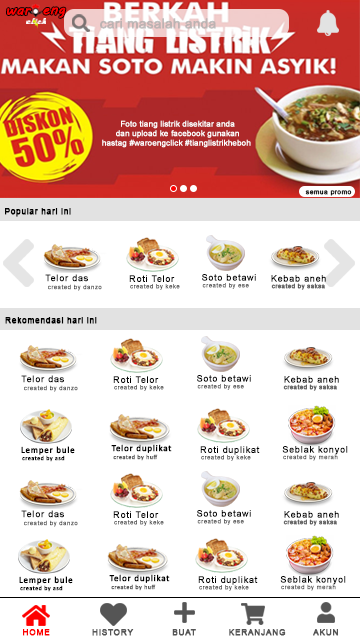
<style>
.page{position:relative;width:360px;height:640px;background:#ffffff}
.page>*{position:absolute;margin:0}
.t1{font:14.4px "MVBoli";color:#fe0000;font-weight:bold}
.t2{font:10.6px "HarlowSolid";color:#ffffff;font-weight:bold}
.t3{font:13.5px "ArialMT";color:#aaaaaa;font-weight:bold}
.t4{font:7.9px "ArialMT";color:#ffffff;font-weight:bold}
.t5{font:6.5px "ArialMT";letter-spacing:0.06em;color:#000000;font-weight:bold}
.t6{font:8.3px "ArialMT";letter-spacing:0.06em;color:#000000;font-weight:bold}
.t7{font:9px "ArialMT";letter-spacing:0.06em;color:#000000;font-weight:bold}
.t8{font:6px "ArialMT";letter-spacing:0.06em;color:#555555;font-weight:bold}
.t9{font:9px "Calibri";letter-spacing:0.06em;color:#000000;font-weight:bold}
.t10{font:6px "Calibri";letter-spacing:0.06em;color:#000000;font-weight:bold}
.t11{font:6px "Calibri";letter-spacing:0.06em;color:#555555;font-weight:bold}
.t12{font:8.3px "ArialMT";letter-spacing:0.06em;color:#fe0000;font-weight:bold}
.t13{font:8.3px "ArialMT";letter-spacing:0.06em;color:#555555;font-weight:bold}
</style>
<div class="page">
<p class="t1" style="left:7px;top:8px;width:25px;height:7px">war</p>
<p class="t1" style="left:43px;top:7px;width:23px;height:11px">eng</p>
<p class="t2" style="left:26px;top:18px;width:20px;height:6px">click</p>
<p class="t3" style="left:100px;top:18px;width:116px;height:11px;opacity:0.76">cari masalah anda</p>
<p class="t4" style="left:102px;top:120px;width:149px;height:28px;text-align:center">Foto tiang listrik disekitar anda<br>dan upload ke facebook gunakan<br>hastag #waroengclick #tianglistrikheboh</p>
<p class="t5" style="left:305px;top:190px;width:47px;height:6px">semua promo</p>
<p class="t6" style="left:5px;top:208px;width:66px;height:9px">Popular hari ini</p>
<p class="t7" style="left:45px;top:274px;width:43px;height:8px">Telor das</p>
<p class="t7" style="left:129px;top:275px;width:46px;height:7px">Roti Telor</p>
<p class="t7" style="left:202px;top:274px;width:54px;height:7px">Soto betawi</p>
<p class="t7" style="left:271px;top:275px;width:55px;height:7px">Kebab aneh</p>
<p class="t8" style="left:48px;top:284px;width:54px;height:7px">created by danzo</p>
<p class="t8" style="left:130px;top:284px;width:50px;height:6px">created by keke</p>
<p class="t8" style="left:202px;top:283px;width:47px;height:6px">created by ese</p>
<p class="t8" style="left:271px;top:283px;width:54px;height:7px">created by saksa</p>
<p class="t6" style="left:5px;top:317px;width:92px;height:7px">Rekomendasi hari ini</p>
<p class="t7" style="left:21px;top:375px;width:43px;height:8px">Telor das</p>
<p class="t7" style="left:113px;top:376px;width:46px;height:7px">Roti Telor</p>
<p class="t7" style="left:197px;top:375px;width:54px;height:7px">Soto betawi</p>
<p class="t7" style="left:284px;top:376px;width:55px;height:7px">Kebab aneh</p>
<p class="t8" style="left:24px;top:385px;width:54px;height:7px">created by danzo</p>
<p class="t8" style="left:114px;top:385px;width:50px;height:6px">created by keke</p>
<p class="t8" style="left:197px;top:384px;width:47px;height:6px">created by ese</p>
<p class="t8" style="left:283px;top:384px;width:54px;height:7px">created by saksa</p>
<p class="t9" style="left:21px;top:446px;width:54px;height:9px">Lemper bule</p>
<p class="t9" style="left:111px;top:444px;width:61px;height:9px">Telor duplikat</p>
<p class="t7" style="left:200px;top:446px;width:60px;height:9px">Roti duplikat</p>
<p class="t7" style="left:282px;top:446px;width:66px;height:9px">Seblak konyol</p>
<p class="t10" style="left:22px;top:455px;width:43px;height:7px">created by asd</p>
<p class="t11" style="left:113px;top:454px;width:45px;height:7px">created by huff</p>
<p class="t8" style="left:201px;top:455px;width:50px;height:6px">created by keke</p>
<p class="t8" style="left:283px;top:454px;width:55px;height:7px">created by merah</p>
<p class="t7" style="left:21px;top:510px;width:43px;height:8px">Telor das</p>
<p class="t7" style="left:197px;top:510px;width:54px;height:7px">Soto betawi</p>
<p class="t8" style="left:24px;top:520px;width:54px;height:7px">created by danzo</p>
<p class="t7" style="left:113px;top:511px;width:46px;height:7px">Roti Telor</p>
<p class="t8" style="left:114px;top:520px;width:50px;height:6px">created by keke</p>
<p class="t8" style="left:197px;top:519px;width:47px;height:6px">created by ese</p>
<p class="t8" style="left:283px;top:519px;width:54px;height:7px">created by saksa</p>
<p class="t7" style="left:284px;top:511px;width:55px;height:7px">Kebab aneh</p>
<p class="t9" style="left:19px;top:576px;width:54px;height:9px">Lemper bule</p>
<p class="t9" style="left:109px;top:574px;width:61px;height:9px">Telor duplikat</p>
<p class="t7" style="left:198px;top:576px;width:60px;height:9px">Roti duplikat</p>
<p class="t7" style="left:280px;top:576px;width:66px;height:9px">Seblak konyol</p>
<p class="t10" style="left:20px;top:585px;width:43px;height:7px">created by asd</p>
<p class="t11" style="left:111px;top:584px;width:45px;height:7px">created by huff</p>
<p class="t8" style="left:199px;top:585px;width:50px;height:6px">created by keke</p>
<p class="t8" style="left:281px;top:584px;width:55px;height:7px">created by merah</p>
<p class="t12" style="left:23px;top:629px;width:27px;height:7px">HOME</p>
<p class="t13" style="left:92px;top:629px;width:42px;height:7px">HISTORY</p>
<p class="t13" style="left:172px;top:629px;width:24px;height:7px">BUAT</p>
<p class="t13" style="left:229px;top:629px;width:57px;height:7px">KERANJANG</p>
<p class="t13" style="left:313px;top:629px;width:25px;height:7px">AKUN</p>
</div>
